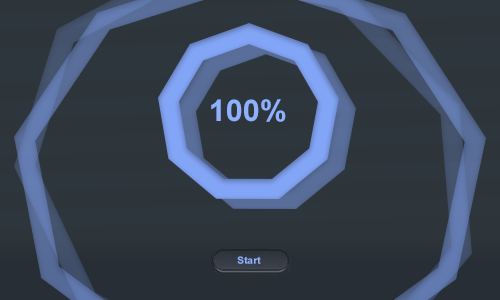
<style>
.page{position:relative;width:500px;height:300px;background:#2e363d}
.page>*{position:absolute;margin:0}
.t1{font:30px "Arial-BoldMT";color:#8fb1fe}
.t2{font:10px "Arial-BoldMT";color:#8fb1fe}
</style>
<div class="page">
<p class="t1" style="left:211px;top:99px;width:75px;height:23px">100%</p>
<p class="t2" style="left:237px;top:256px;width:24px;height:8px">Start</p>
</div>
